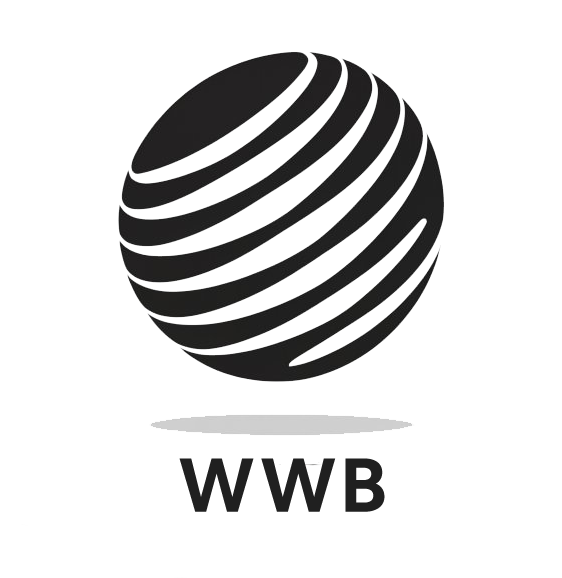
<style>
.page{position:relative;width:562px;height:578px;background:#ffffff}
.page>*{position:absolute;margin:0}
.t1{font:75px "AirbnbCerealWBd";letter-spacing:0.025em;color:#202020;text-transform:uppercase}
</style>
<div class="page">
<p class="t1" style="left:179px;top:458px;width:206px;height:54px">WWB</p>
</div>
